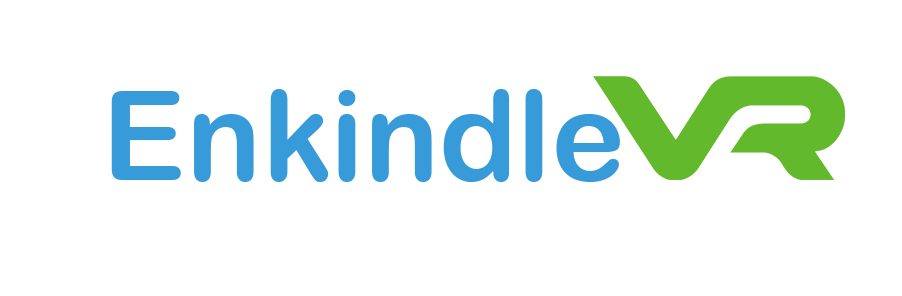
<style>
.page{position:relative;width:902px;height:296px;background:#ffffff}
.page>*{position:absolute;margin:0}
.t1{font:125px "ArialRoundedMTBold";color:#369bd8}
</style>
<div class="page">
<p class="t1" style="left:111px;top:89px;width:509px;height:93px">Enkindle</p>
</div>
